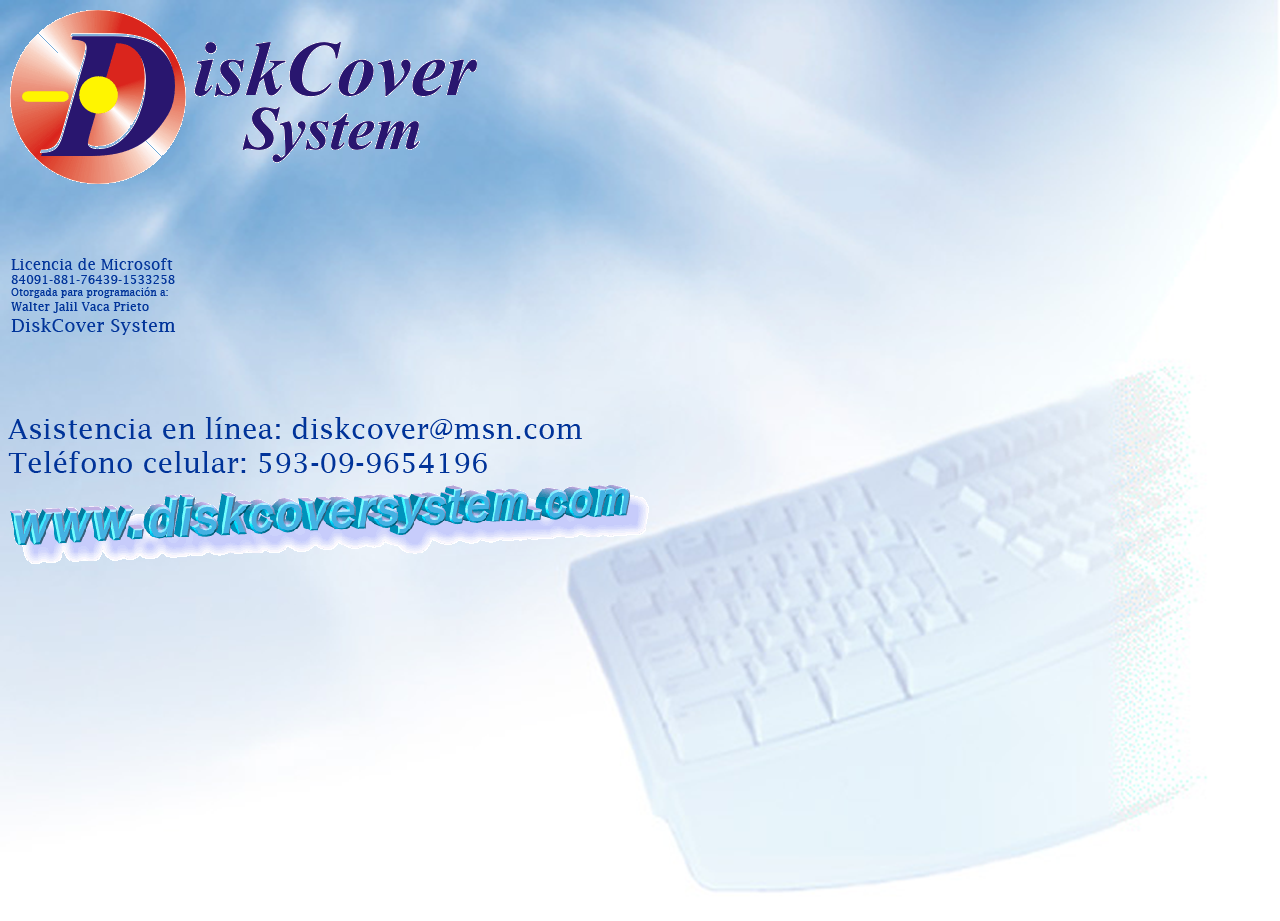
<style>
.page{position:relative;width:1280px;height:921px}
.page>*{position:absolute;margin:0}
.t1{font:10px "LucidaFax";color:#003399}
.t2{font:15px "LucidaFax";color:#003399}
.t3{font:12px "LucidaFax";color:#003399}
.t4{font:18px "LucidaFax";color:#003399}
.t5{font:28px "LucidaFax";color:#003399}
</style>
<div class="page">
<p class="t1" style="left:11px;top:258px;width:165px;height:77px"><span class="t2">Licencia de Microsoft<br></span><span class="t3">84091-881-76439-1533258<br></span>Otorgada para programación a:<br><span class="t3">Walter Jalil Vaca Prieto<br></span><span class="t4">DiskCover System</span></p>
<p class="t5" style="left:8px;top:417px;width:574px;height:56px">Asistencia en línea: diskcover@msn.com<br>Teléfono celular: 593-09-9654196</p>
</div>
